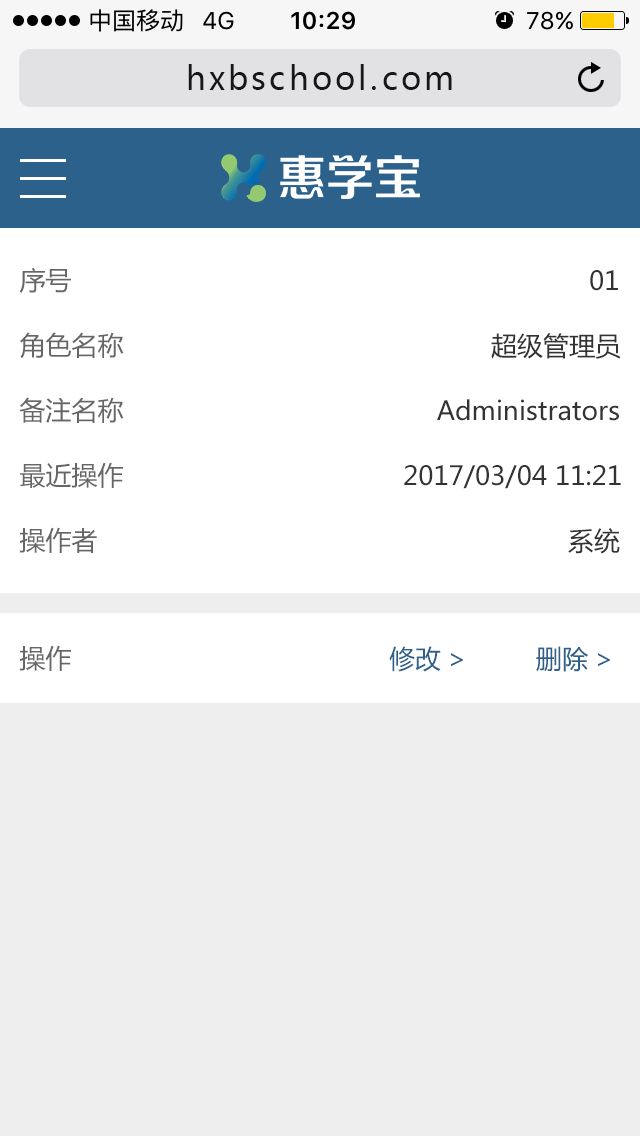
<style>
.page{position:relative;width:640px;height:1136px;background:#eeeeee}
.page>*{position:absolute;margin:0}
.t1{font:32px "MicrosoftYaHei";letter-spacing:0.1em;color:#171717}
.t2{font:26px "MicrosoftYaHei";color:#666666}
.t3{font:26px "MicrosoftYaHei";color:#333333}
.t4{font:26px "MicrosoftYaHei";color:#2c618b}
</style>
<div class="page">
<p class="t1" style="left:188px;top:64px;width:264px;height:26px">hxbschool.com</p>
<p class="t2" style="left:19px;top:267px;width:52px;height:26px">序号</p>
<p class="t3" style="left:590px;top:270px;width:28px;height:21px">01</p>
<p class="t2" style="left:20px;top:332px;width:104px;height:27px">角色名称</p>
<p class="t3" style="left:491px;top:333px;width:130px;height:26px">超级管理员</p>
<p class="t2" style="left:19px;top:397px;width:105px;height:26px">备注名称</p>
<p class="t3" style="left:437px;top:399px;width:182px;height:22px">Administrators</p>
<p class="t2" style="left:20px;top:462px;width:103px;height:26px">最近操作</p>
<p class="t3" style="left:404px;top:465px;width:217px;height:24px">2017/03/04 11:21</p>
<p class="t2" style="left:19px;top:527px;width:78px;height:26px">操作者</p>
<p class="t3" style="left:568px;top:528px;width:52px;height:26px">系统</p>
<p class="t2" style="left:19px;top:645px;width:52px;height:26px">操作</p>
<p class="t4" style="left:389px;top:646px;width:221px;height:26px">修改&gt;         删除&gt;</p>
</div>
